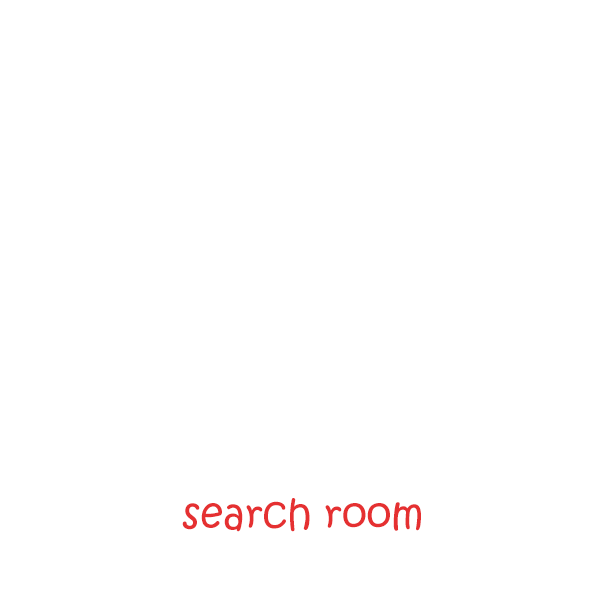
<style>
.page{position:relative;width:600px;height:600px;background:#ffffff}
.page>*{position:absolute;margin:0}
.t1{font:40px "KristenITC-Regular";color:#e53031}
</style>
<div class="page">
<p class="t1" style="left:182px;top:498px;width:239px;height:34px">search room</p>
</div>
